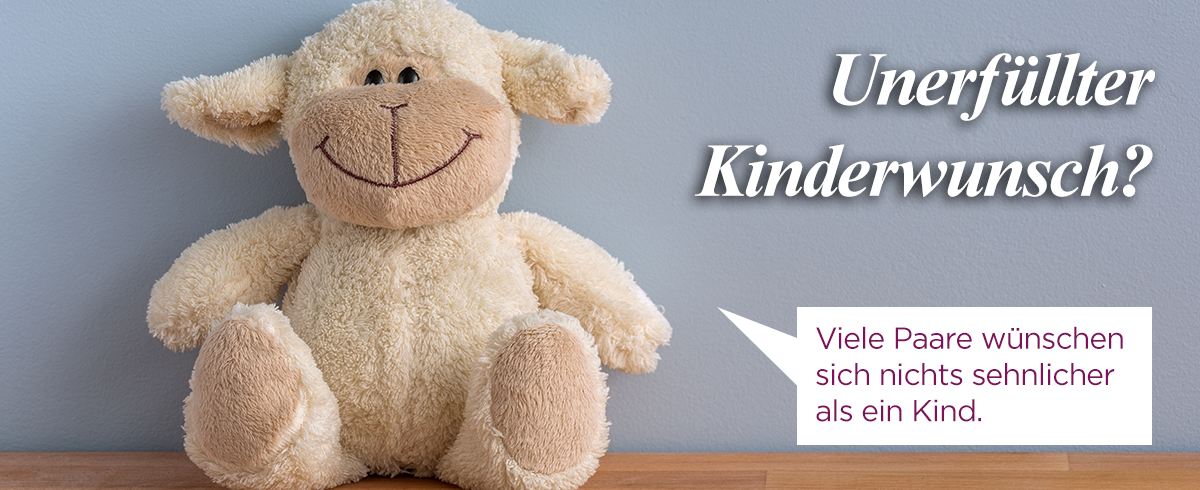
<style>
.page{position:relative;width:1200px;height:490px}
.page>*{position:absolute;margin:0}
.t1{font:76px "TimesNewRomanPS-BoldItalicMT";letter-spacing:-0.025em;color:#ffffff}
.t2{font:30.2px "Gotham-Book";letter-spacing:-0.025em;color:#7e125d}
</style>
<div class="page">
<p class="t1" style="left:694px;top:53px;width:461px;height:144px;text-align:right">Unerfüllter<br>Kinderwunsch?</p>
<p class="t2" style="left:816px;top:326px;width:307px;height:96px">Viele Paare wünschen <br>sich nichts sehnlicher <br>als ein Kind.</p>
</div>
